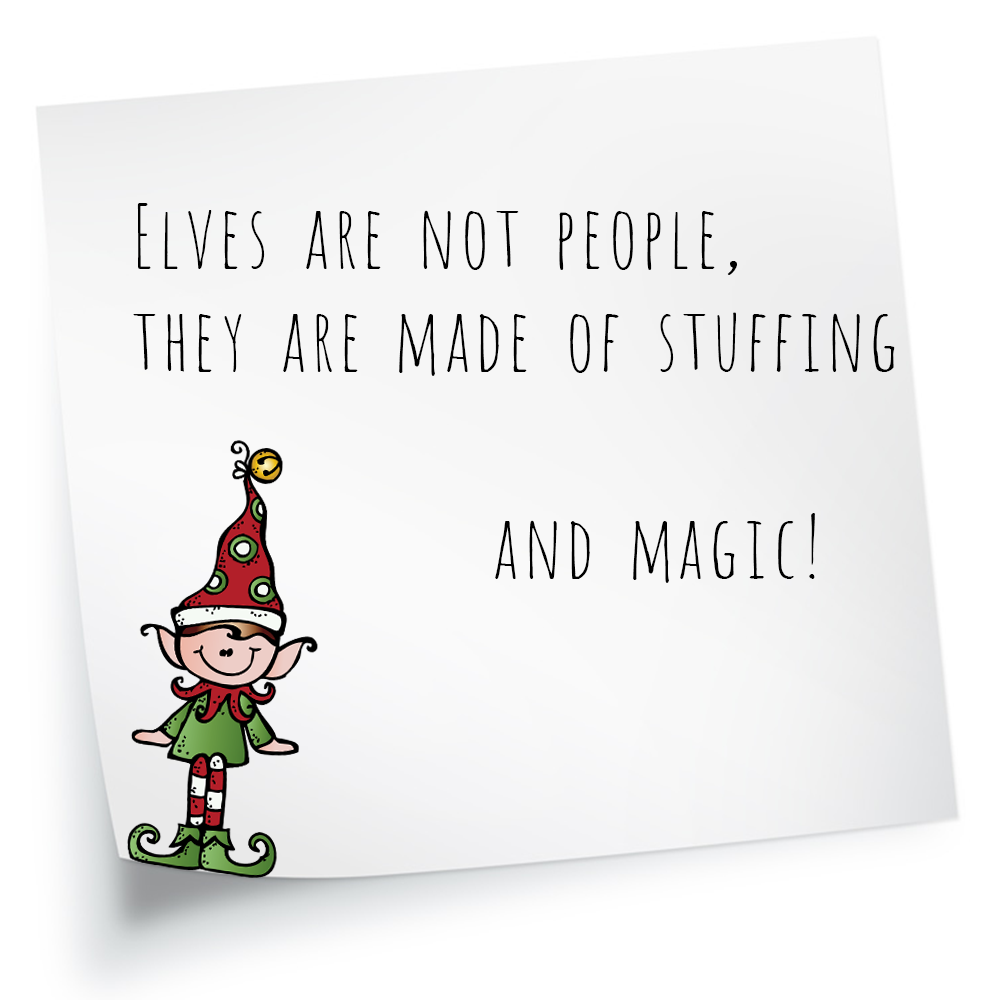
<style>
.page{position:relative;width:1000px;height:1000px;background:#ffffff}
.page>*{position:absolute;margin:0}
.t1{font:86.1px "Amatic";color:#000000}
</style>
<div class="page">
<p class="t1" style="left:133px;top:203px;width:762px;height:380px">Elves are not people,<br>they are made of stuffing<br><br>          and magic!</p>
</div>
